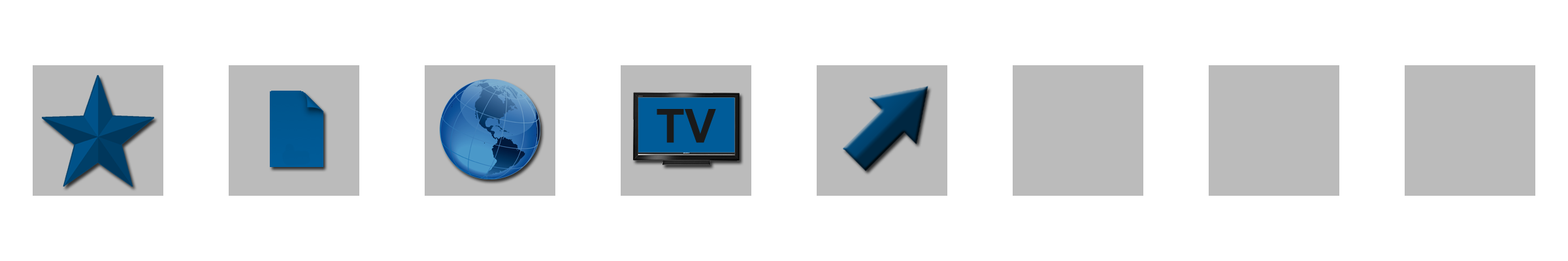
<style>
.page{position:relative;width:1568px;height:261px;background:#ffffff}
.page>*{position:absolute;margin:0}
.t1{font:47px "Arial-BoldMT";color:#1a1a1a}
</style>
<div class="page">
<p class="t1" style="left:657px;top:109px;width:59px;height:34px">TV</p>
</div>
